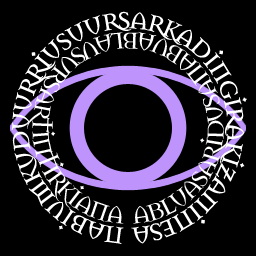
<style>
.page{position:relative;width:256px;height:256px;background:#000000}
.page>*{position:absolute;margin:0}
.t1{font:36px "Mason-Regular";letter-spacing:-0.1em;color:#ffffff}
.t2{font:36px "Mason-Regular";letter-spacing:-0.075em;color:#ffffff}
</style>
<div class="page">
<p class="t1" style="left:11px;top:11px;width:236px;height:233px;text-align:center">nabiumkuduurriusuursarkadingirakizaninesagiliuezida</p>
<p class="t2" style="left:27px;top:31px;width:202px;height:193px;text-align:center">abluasaridusanabuablausursartintirkianakuananabi</p>
</div>
